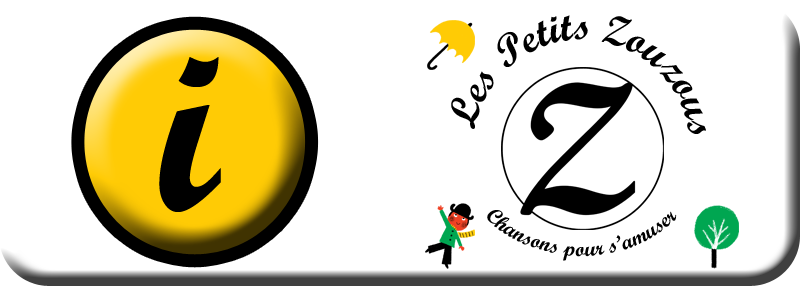
<style>
.page{position:relative;width:800px;height:288px;background:#ffffff}
.page>*{position:absolute;margin:0}
.t1{font:42px "ScriptMTBold";color:#000000}
.t2{font:250px "ScriptMTBold";color:#000000}
.t3{font:22px "ScriptMTBold";color:#000000}
</style>
<div class="page">
<p class="t1" style="left:451px;top:15px;width:255px;height:119px">Les Petits Zouzous</p>
<p class="t2" style="left:159px;top:57px;width:62px;height:155px">i</p>
<p class="t3" style="left:487px;top:210px;width:190px;height:51px">Chansons pour s’amuser</p>
</div>
